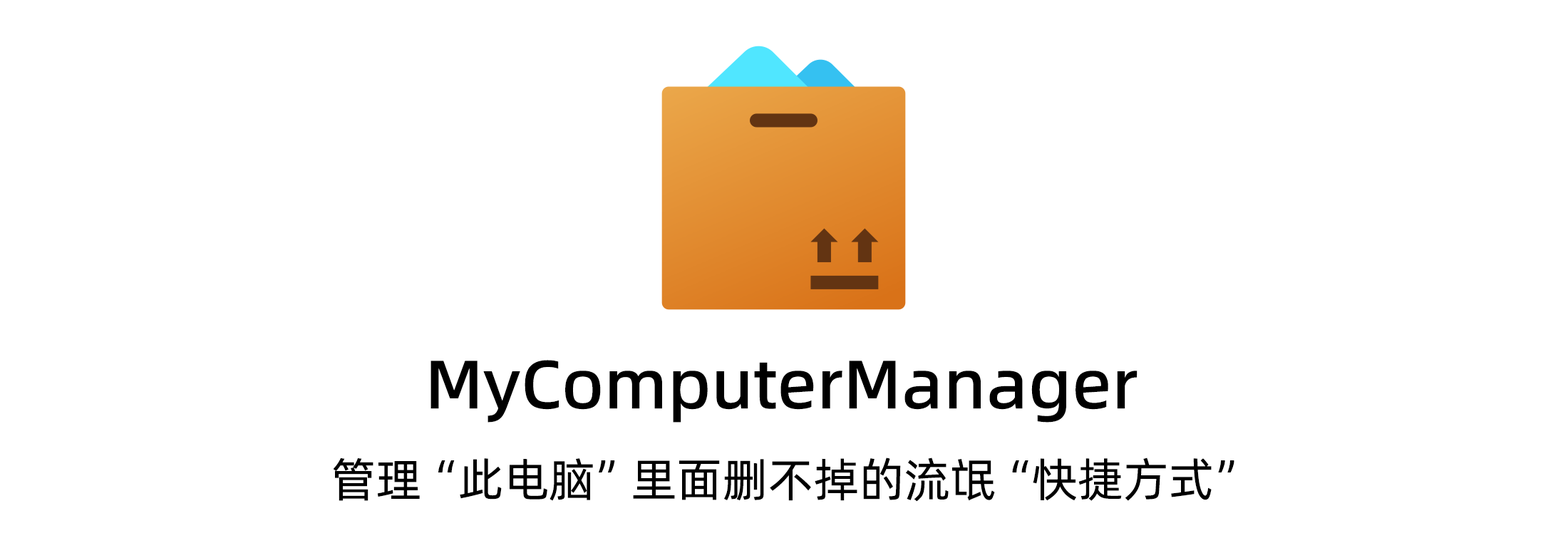
<style>
.page{position:relative;width:1568px;height:548px;background:#ffffff}
.page>*{position:absolute;margin:0}
.t1{font:68.4px "AlibabaPuHuiTi_2_65_Medium";color:#000000}
.t2{font:46.3px "AlibabaPuHuiTi_2_55_Regular";color:#000000}
</style>
<div class="page">
<p class="t1" style="left:430px;top:360px;width:708px;height:63px">MyComputerManager</p>
<p class="t2" style="left:333px;top:458px;width:901px;height:44px">管理“此电脑”里面删不掉的流氓“快捷方式”</p>
</div>
